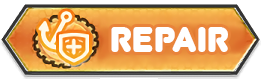
<style>
.page{position:relative;width:261px;height:79px;background:#ffffff}
.page>*{position:absolute;margin:0}
.t1{font:36px "Junegull";color:#ffffff}
</style>
<div class="page">
<p class="t1" style="left:111px;top:27px;width:117px;height:25px">REPAIR</p>
</div>
